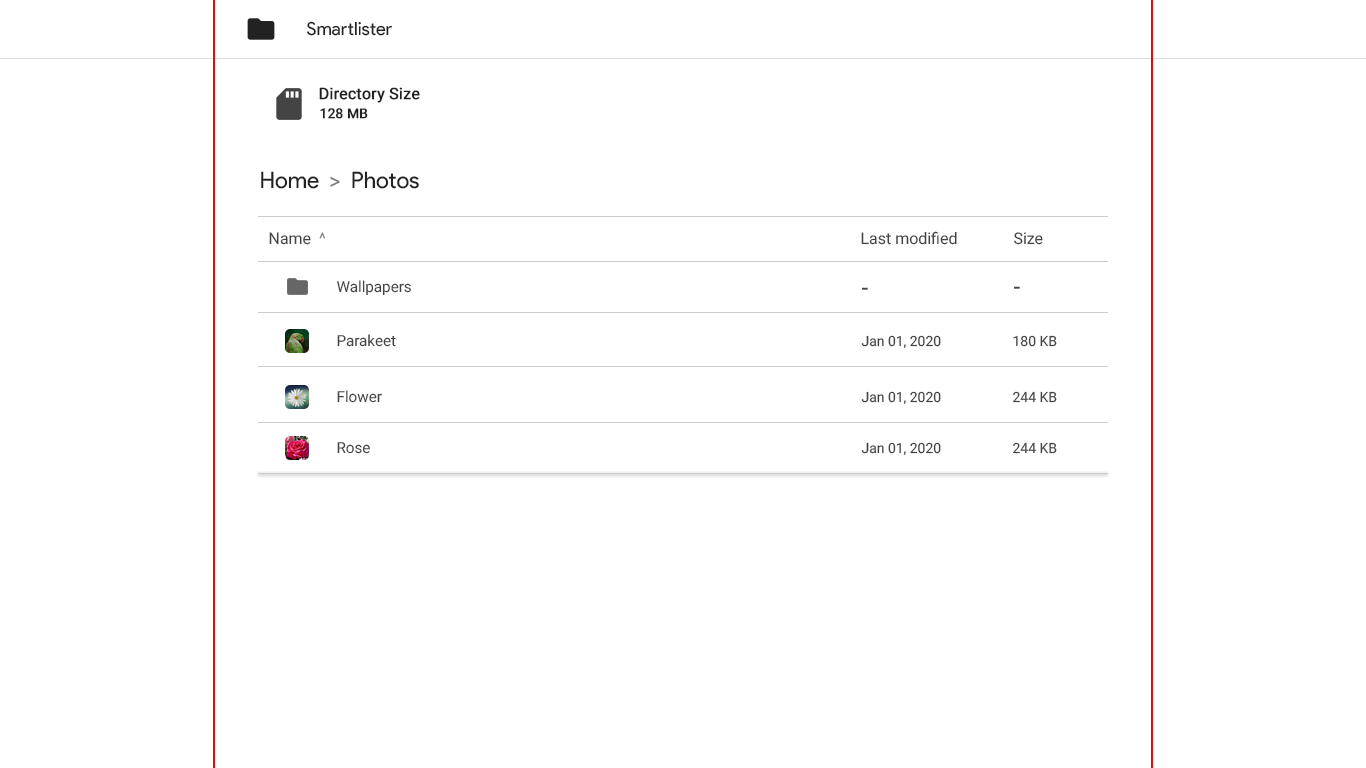
<style>
.page{position:relative;width:1366px;height:768px;background:#ffffff}
.page>*{position:absolute;margin:0}
.t1{font:17.9px "ProductSans-Regular";color:#222222}
.t2{font:15.7px "Roboto-Regular";color:#222222;font-weight:bold}
.t3{font:13.5px "Roboto-Regular";color:#222222;font-weight:bold}
.t4{font:22.8px "ProductSans-Regular";color:#222222}
.t5{font:22.8px "ProductSans-Regular";color:#777777}
.t6{font:16px "Roboto-Regular";color:#444444}
.t7{font:16px "Roboto-Regular";color:#777777}
.t8{font:15.2px "Roboto-Regular";color:#444444}
.t9{font:24px "Roboto-Regular";color:#444444}
.t10{font:13.9px "Roboto-Regular";color:#444444}
</style>
<div class="page">
<p class="t1" style="left:307px;top:21px;width:85px;height:15px">Smartlister</p>
<p class="t2" style="left:319px;top:87px;width:101px;height:16px">Directory Size</p>
<p class="t3" style="left:320px;top:108px;width:48px;height:11px">128 MB</p>
<p class="t4" style="left:261px;top:171px;width:158px;height:18px">Home  <span class="t5">&gt;</span>  Photos</p>
<p class="t6" style="left:269px;top:232px;width:56px;height:13px">Name  <span class="t7">^</span></p>
<p class="t6" style="left:861px;top:231px;width:96px;height:14px">Last modified</p>
<p class="t6" style="left:1014px;top:232px;width:29px;height:13px">Size</p>
<p class="t8" style="left:337px;top:280px;width:74px;height:16px">Wallpapers</p>
<p class="t9" style="left:862px;top:287px;width:6px;height:3px">-</p>
<p class="t9" style="left:1014px;top:286px;width:6px;height:3px">-</p>
<p class="t8" style="left:337px;top:334px;width:59px;height:13px">Parakeet</p>
<p class="t10" style="left:861px;top:335px;width:80px;height:13px">Jan 01, 2020</p>
<p class="t10" style="left:1013px;top:335px;width:44px;height:12px">180 KB</p>
<p class="t8" style="left:337px;top:390px;width:45px;height:13px">Flower</p>
<p class="t10" style="left:861px;top:391px;width:80px;height:13px">Jan 01, 2020</p>
<p class="t10" style="left:1013px;top:391px;width:44px;height:12px">244 KB</p>
<p class="t8" style="left:337px;top:442px;width:33px;height:12px">Rose</p>
<p class="t10" style="left:861px;top:442px;width:80px;height:13px">Jan 01, 2020</p>
<p class="t10" style="left:1013px;top:442px;width:44px;height:12px">244 KB</p>
</div>
